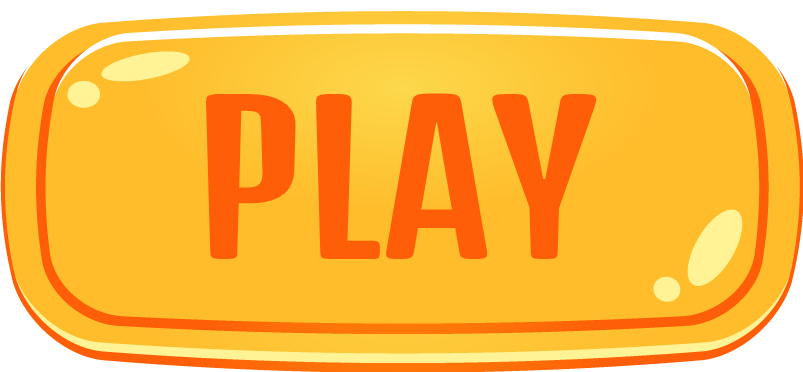
<style>
.page{position:relative;width:803px;height:372px;background:#ffbc2b}
.page>*{position:absolute;margin:0}
.t1{font:200px "DenkOne-Regular";color:#ff5e08}
</style>
<div class="page">
<p class="t1" style="left:206px;top:93px;width:391px;height:166px">PLAY</p>
</div>
